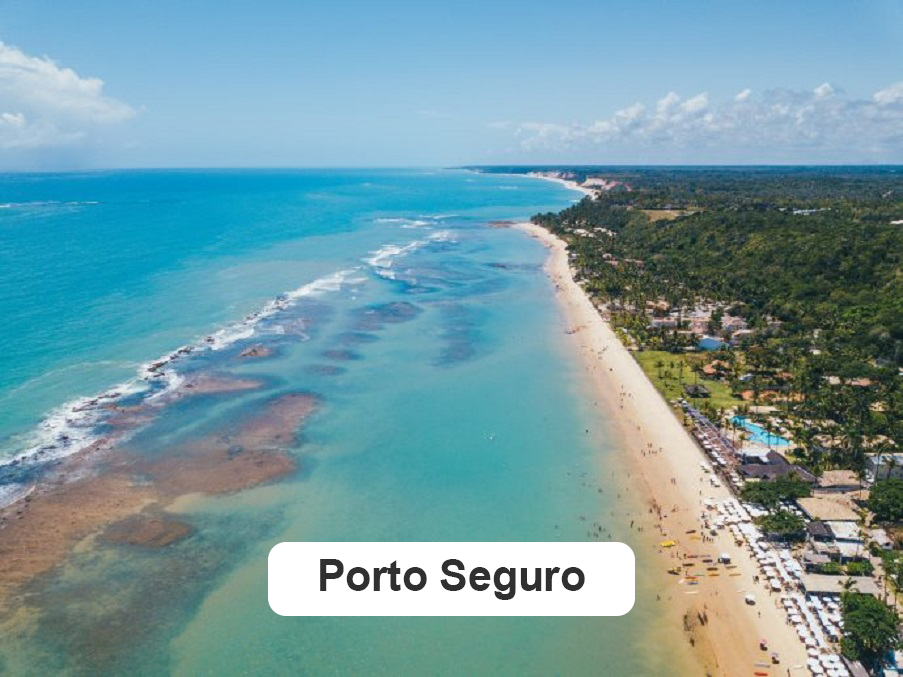
<style>
.page{position:relative;width:903px;height:677px}
.page>*{position:absolute;margin:0}
.t1{font:43.9px "Arial-BoldMT";color:#313030}
</style>
<div class="page">
<p class="t1" style="left:320px;top:559px;width:265px;height:41px">Porto Seguro</p>
</div>
